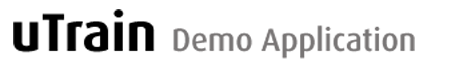
<style>
.page{position:relative;width:475px;height:63px;background:#ffffff}
.page>*{position:absolute;margin:0}
.t1{font:32.2px "Dax-Medium";color:#787575}
.t2{font:53.6px "Dax-Bold";color:#000000}
</style>
<div class="page">
<p class="t1" style="left:13px;top:9px;width:402px;height:50px"><span class="t2">uTrain </span>Demo Application</p>
</div>
